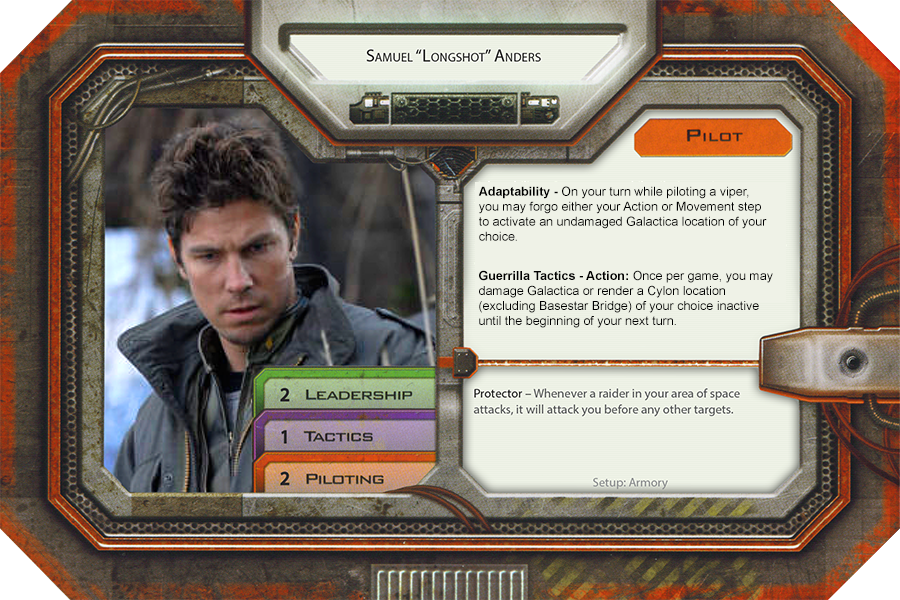
<style>
.page{position:relative;width:900px;height:600px}
.page>*{position:absolute;margin:0}
.t1{font:12.5px "ArialMT";color:#000000}
.t2{font:12.5px "Arial-BoldMT";color:#000000}
</style>
<div class="page">
<p class="t1" style="left:478px;top:186px;width:289px;height:55px"><span class="t2">Adaptability - </span>On your turn while piloting a viper,<br>you may forgo either your Action or Movement step <br>to activate an undamaged Galactica location of your <br>choice.</p>
<p class="t1" style="left:479px;top:270px;width:294px;height:58px"><span class="t2">Guerrilla Tactics - Action:</span> Once per game, you may <br>damage Galactica or render a Cylon location <br>(excluding Basestar Bridge) of your choice inactive <br>until the beginning of your next turn.</p>
</div>
